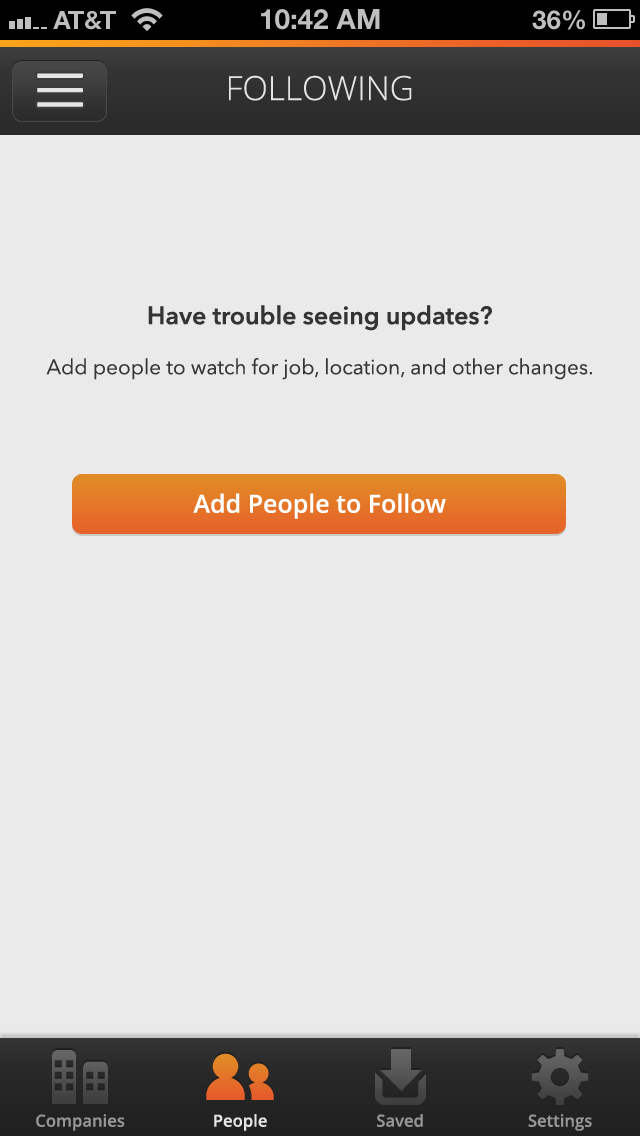
<style>
.page{position:relative;width:640px;height:1136px;background:#eaeaea}
.page>*{position:absolute;margin:0}
.t1{font:33.3px "OpenSans-Light";color:#e5e5e5}
.t2{font:20.8px "AvenirNext-Regular";color:#343434}
.t3{font:25px "AvenirNext-DemiBold";color:#343434}
.t4{font:25px "OpenSans-Semibold";color:#ffffff}
.t5{font:16.7px "OpenSans-Semibold";color:#969696}
.t6{font:16.7px "OpenSans-Semibold";color:#e5e5e5}
</style>
<div class="page">
<p class="t1" style="left:229px;top:75px;width:183px;height:26px">FOLLOWING</p>
<p class="t2" style="left:46px;top:305px;width:546px;height:75px;text-align:center"><span class="t3">Have trouble seeing updates?<br><br></span>Add people to watch for job, location, and other changes.</p>
<p class="t4" style="left:193px;top:493px;width:253px;height:26px">Add People to Follow</p>
<p class="t5" style="left:36px;top:1114px;width:89px;height:17px">Companies</p>
<p class="t6" style="left:214px;top:1114px;width:53px;height:17px">People</p>
<p class="t5" style="left:377px;top:1114px;width:46px;height:13px">Saved</p>
<p class="t5" style="left:528px;top:1114px;width:64px;height:17px">Settings</p>
</div>
